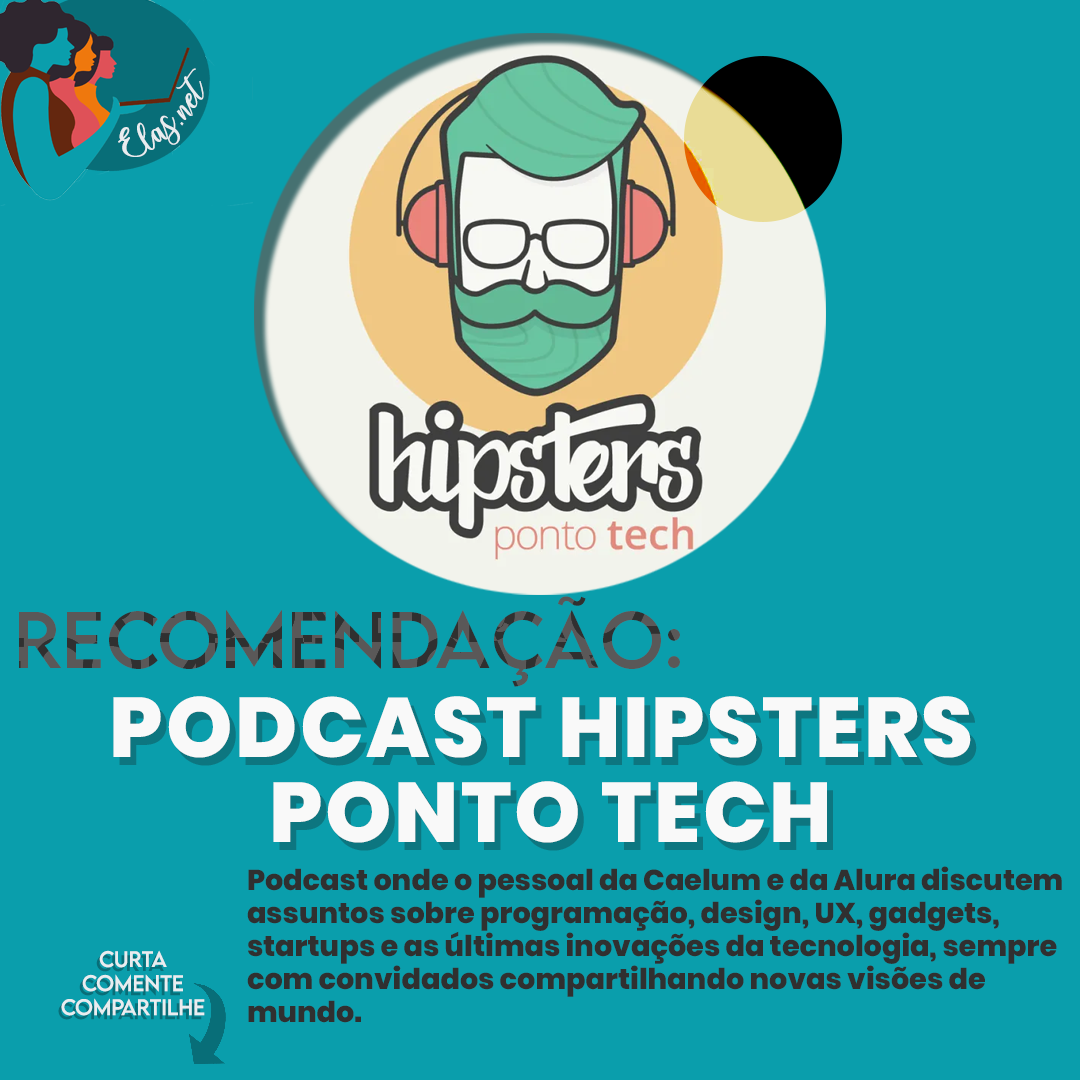
<style>
.page{position:relative;width:1080px;height:1080px;background:#0a9eac}
.page>*{position:absolute;margin:0}
.t1{font:25px "charlinda-Regular";color:#e9edf0;scale:1.18 1}
.t2{font:71.7px "LEMONMILK-Regular";letter-spacing:0.005em}
.t3{font:84.5px/85px "Poppins-ExtraBold";letter-spacing:0.03em;color:#f9f9f9;text-transform:uppercase}
.t4{font:84.5px/85px "Poppins-ExtraBold";letter-spacing:0.03em;text-transform:uppercase}
.t5{font:28.7px/33.2px "Poppins-ExtraBold";color:#303030}
.t6{font:20px "LEMONMILK-Regular";color:#e9edf0}
.t7{font:20px "LEMONMILK-Regular";color:#086e78}
</style>
<div class="page">
<p class="t1" style="left:118px;top:68px;width:86px;height:89px;rotate:-43deg">Elas.net</p>
<p class="t2" style="left:19px;top:596px;width:661px;height:91px">Recomendação:</p>
<p class="t3" style="left:113px;top:696px;width:858px;height:147px;text-align:center">Podcast Hipsters <br>Ponto Tech</p>
<p class="t4" style="left:119px;top:704px;width:858px;height:147px;text-align:center">Podcast Hipsters <br>Ponto Tech</p>
<p class="t5" style="left:247px;top:866px;width:815px;height:157px">Podcast onde o pessoal da Caelum e da Alura discutem <br>assuntos sobre programação, design, UX, gadgets, <br>startups e as últimas inovações da tecnologia, sempre <br>com convidados compartilhando novas visões de <br>mundo.</p>
<p class="t6" style="left:61px;top:950px;width:144px;height:66px;text-align:center">Curta<br>Comente<br>Compartilhe</p>
<p class="t7" style="left:58px;top:954px;width:144px;height:66px;text-align:center">Curta<br>Comente<br>Compartilhe</p>
</div>
